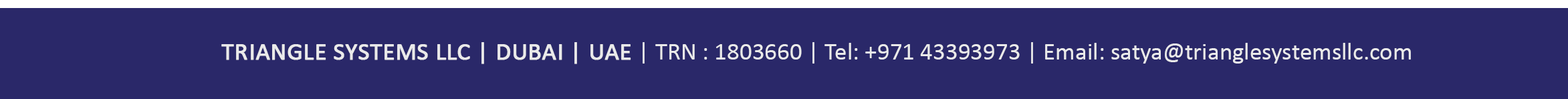
<style>
.page{position:relative;width:1568px;height:99px;background:#2a2869}
.page>*{position:absolute;margin:0}
.t1{font:24.7px "Calibri";color:#eaeaea}
.t2{font:24.7px "Calibri";color:#eaeaea;text-transform:uppercase;font-weight:bold}
</style>
<div class="page">
<p class="t1" style="left:221px;top:42px;width:1190px;height:22px"><span class="t2">TRIANGLE SYSTEMS LLC | Dubai | uae </span>| TRN : 1803660 | Tel: +971 43393973 | Email: satya@trianglesystemsllc.com</p>
</div>
